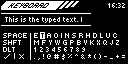
<style>
.page{position:relative;width:128px;height:64px;background:#000000}
.page>*{position:absolute;margin:0}
.t1{font:8px "Tiny5-Regular";color:#ffffff}
.t2{font:8px/7px "Tiny5-Regular";color:#ffffff}
</style>
<div class="page">
<p class="t1" style="left:108px;top:3px;width:17px;height:5px">16:32</p>
<p class="t1" style="left:5px;top:16px;width:77px;height:7px">This is the typed text. |</p>
<p class="t1" style="left:3px;top:40px;width:18px;height:5px">SHFT</p>
<p class="t1" style="left:3px;top:33px;width:24px;height:5px">SPACE</p>
<p class="t2" style="left:34px;top:33px;width:91px;height:27px">E T A O I N S R H D L U C<br>M F Y W G P B V K X Q J Z<br>1 2 3 4 5 6 7 8 9<br>. , ! @ # $ % ^ &amp; * ( ) - _ + =</p>
<p class="t1" style="left:3px;top:47px;width:12px;height:5px">DLT</p>
</div>
